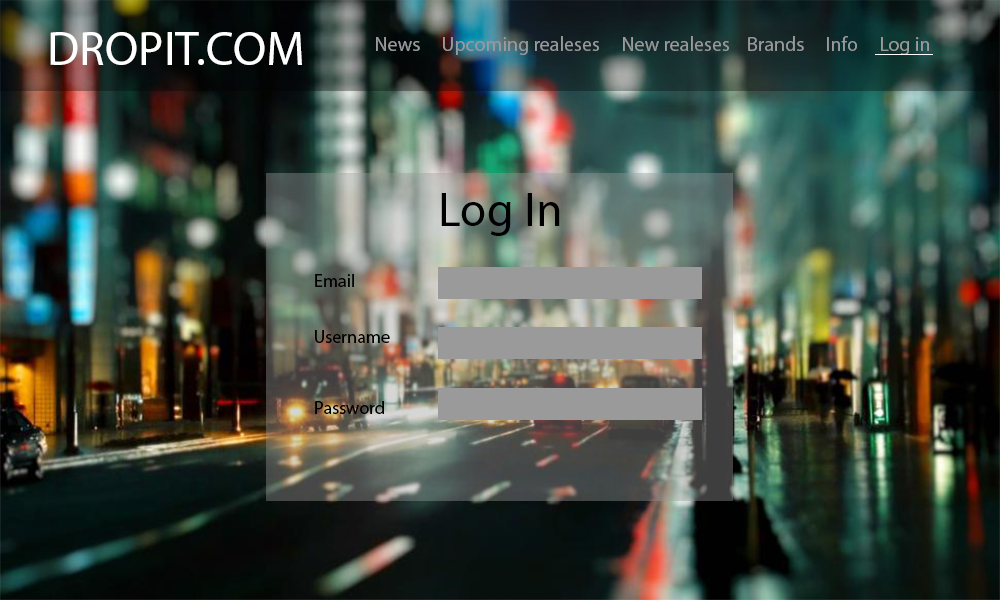
<style>
.page{position:relative;width:1000px;height:600px}
.page>*{position:absolute;margin:0}
.t1{font:48px "MyriadPro-Regular";color:#ffffff}
.t2{font:20px "MyriadPro-Regular";color:#848484}
.t3{font:48px "MyriadPro-Regular";color:#000000}
.t4{font:18px "MyriadPro-Regular";color:#000000}
</style>
<div class="page">
<p class="t1" style="left:50px;top:32px;width:252px;height:33px">DROPIT.COM</p>
<p class="t2" style="left:376px;top:36px;width:553px;height:19px">News     Upcoming realeses     New realeses    Brands     Info     Log in</p>
<p class="t3" style="left:441px;top:193px;width:119px;height:43px">Log In</p>
<p class="t4" style="left:315px;top:274px;width:39px;height:13px">Email</p>
<p class="t4" style="left:315px;top:330px;width:75px;height:13px">Username</p>
<p class="t4" style="left:315px;top:401px;width:69px;height:13px">Password</p>
</div>
